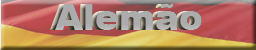
<style>
.page{position:relative;width:256px;height:50px}
.page>*{position:absolute;margin:0}
.t1{font:36px "Arial-Black";color:#acacac}
</style>
<div class="page">
<p class="t1" style="left:55px;top:4px;width:147px;height:26px">Alemão</p>
</div>
